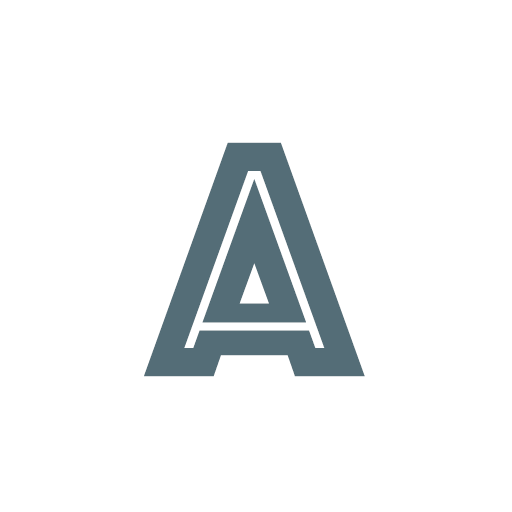
<style>
.page{position:relative;width:512px;height:512px;background:#ffffff}
.page>*{position:absolute;margin:0}
.t1{font:349.6px "Phosphate-Inline";color:#546d77;scale:0.95 1}
</style>
<div class="page">
<p class="t1" style="left:144px;top:142px;width:221px;height:235px">A</p>
</div>
